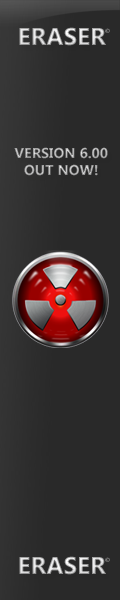
<style>
.page{position:relative;width:120px;height:600px;background:#292929}
.page>*{position:absolute;margin:0}
.t1{font:24.3px "SegoeUI-Bold"}
.t2{font:6.1px "SegoeUI-Bold"}
.t3{font:14.2px "SegoeUI-Bold";color:#b4b4b4}
</style>
<div class="page">
<p class="t1" style="left:19px;top:27px;width:87px;height:19px">ERASER</p>
<p class="t2" style="left:105px;top:28px;width:5px;height:5px">©</p>
<p class="t3" style="left:14px;top:147px;width:94px;height:29px;text-align:center">VERSION 6.00<br>OUT NOW!</p>
<p class="t1" style="left:19px;top:556px;width:87px;height:19px">ERASER</p>
<p class="t2" style="left:105px;top:557px;width:5px;height:5px">©</p>
</div>
